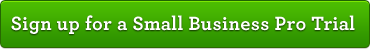
<style>
.page{position:relative;width:370px;height:49px}
.page>*{position:absolute;margin:0}
.t1{font:20px "Archer-BoldLF";letter-spacing:0.02em;color:#ffffff}
</style>
<div class="page">
<p class="t1" style="left:11px;top:15px;width:344px;height:19px">Sign up for a Small Business Pro Trial</p>
</div>
